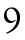
<style>
.page{position:relative;width:25px;height:40px;background:#ffffff}
.page>*{position:absolute;margin:0}
.t1{font:40px "Centaur";color:#000000}
</style>
<div class="page">
<p class="t1" style="left:4px;top:7px;width:16px;height:27px">9</p>
</div>
